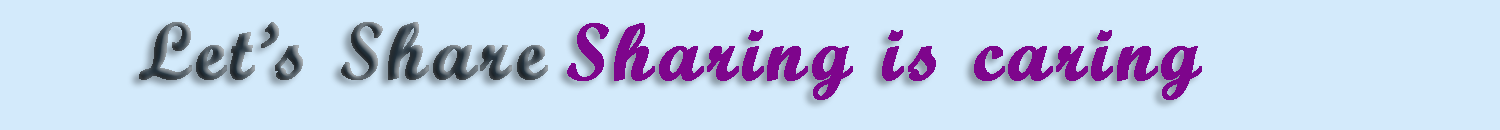
<style>
.page{position:relative;width:1500px;height:130px;background:#d3eafb}
.page>*{position:absolute;margin:0}
.t1{font:80px "ScriptMTBold";letter-spacing:0.05em;font-weight:bold}
.t2{font:80px "ScriptMTBold";letter-spacing:0.05em;color:#7e058c;font-weight:bold}
</style>
<div class="page">
<p class="t1" style="left:139px;top:22px;width:409px;height:58px">Let’s Share</p>
<p class="t2" style="left:567px;top:23px;width:635px;height:77px">Sharing is caring</p>
</div>
